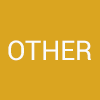
<style>
.page{position:relative;width:100px;height:100px;background:#daa520}
.page>*{position:absolute;margin:0}
.t1{font:27px "Roboto-Regular";color:#fafcfb}
</style>
<div class="page">
<p class="t1" style="left:8px;top:40px;width:83px;height:21px">OTHER</p>
</div>
